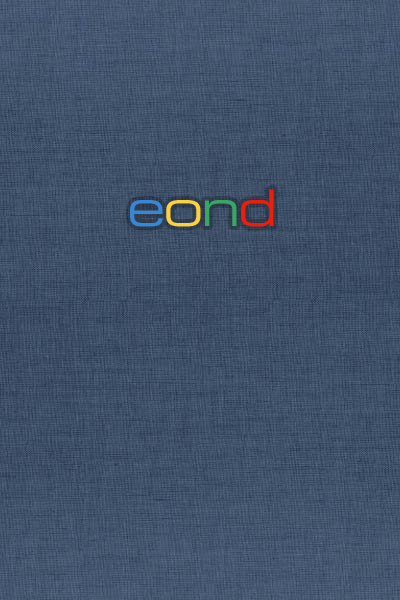
<style>
.page{position:relative;width:400px;height:600px}
.page>*{position:absolute;margin:0}
.t1{font:50px "Eurostile-ExtendedTwo";letter-spacing:-0.05em;color:#3887d4}
.t2{font:50px "Eurostile-ExtendedTwo";letter-spacing:-0.05em;color:#fcd03e}
.t3{font:50px "Eurostile-ExtendedTwo";letter-spacing:-0.05em;color:#37a765}
.t4{font:50px "Eurostile-ExtendedTwo";letter-spacing:-0.05em;color:#f21c0a}
</style>
<div class="page">
<p class="t1" style="left:130px;top:189px;width:144px;height:38px">e<span class="t2">o</span><span class="t3">n</span><span class="t4">d</span></p>
</div>
